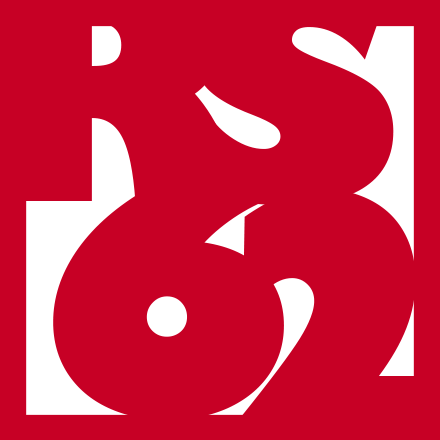
<style>
.page{position:relative;width:440px;height:440px;background:#c70025}
.page>*{position:absolute;margin:0}
.t1{font:300px "GillSans-UltraBold";color:#c70025}
</style>
<div class="page">
<p class="t1" style="left:53px;top:189px;width:369px;height:231px">62</p>
</div>
